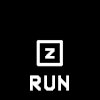
<style>
.page{position:relative;width:100px;height:100px;background:#000000}
.page>*{position:absolute;margin:0}
.t1{font:17.5px "VCROSDMono";letter-spacing:0.075em;color:#ffffff;font-weight:bold}
.t2{font:20.5px "VCROSDMono";letter-spacing:0.075em;color:#ffffff;font-weight:bold}
</style>
<div class="page">
<p class="t1" style="left:45px;top:48px;width:10px;height:11px">z</p>
<p class="t2" style="left:30px;top:75px;width:39px;height:16px">RUN</p>
</div>
